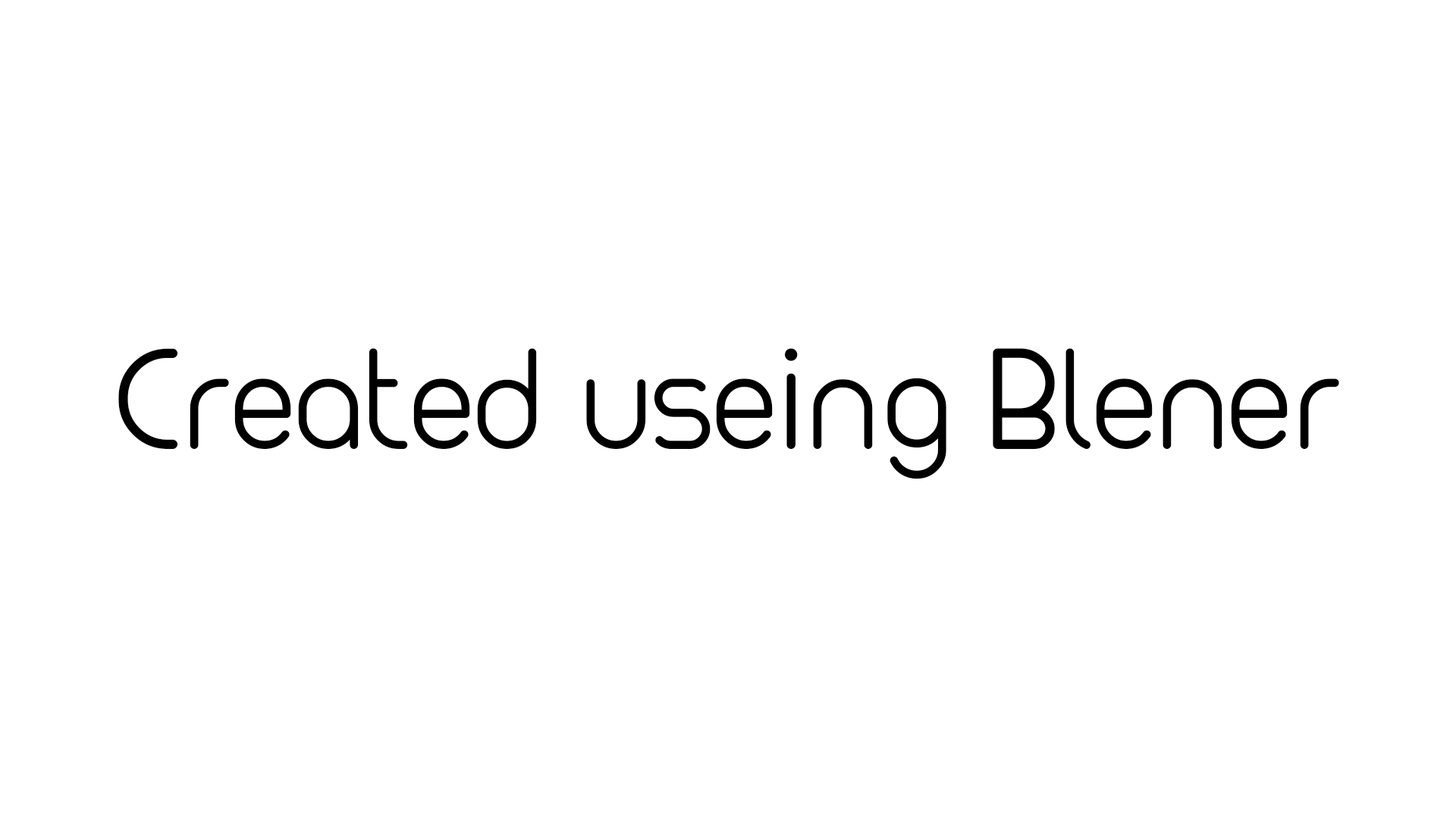
<style>
.page{position:relative;width:1456px;height:819px;background:#ffffff}
.page>*{position:absolute;margin:0}
.t1{font:161.1px "MAXWELLREGULAR";color:#000000}
</style>
<div class="page">
<p class="t1" style="left:118px;top:348px;width:1221px;height:131px">Created useing Blener</p>
</div>
